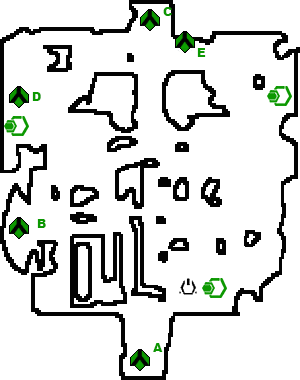
<style>
.page{position:relative;width:300px;height:380px;background:#ffffff}
.page>*{position:absolute;margin:0}
.t1{font:12px "Arial-Black";color:#0c9801}
</style>
<div class="page">
<p class="t1" style="left:163px;top:7px;width:9px;height:9px">C</p>
<p class="t1" style="left:197px;top:48px;width:9px;height:9px">E</p>
<p class="t1" style="left:32px;top:92px;width:9px;height:9px">D</p>
<p class="t1" style="left:37px;top:219px;width:9px;height:9px">B</p>
<p class="t1" style="left:153px;top:343px;width:10px;height:9px">A</p>
</div>
